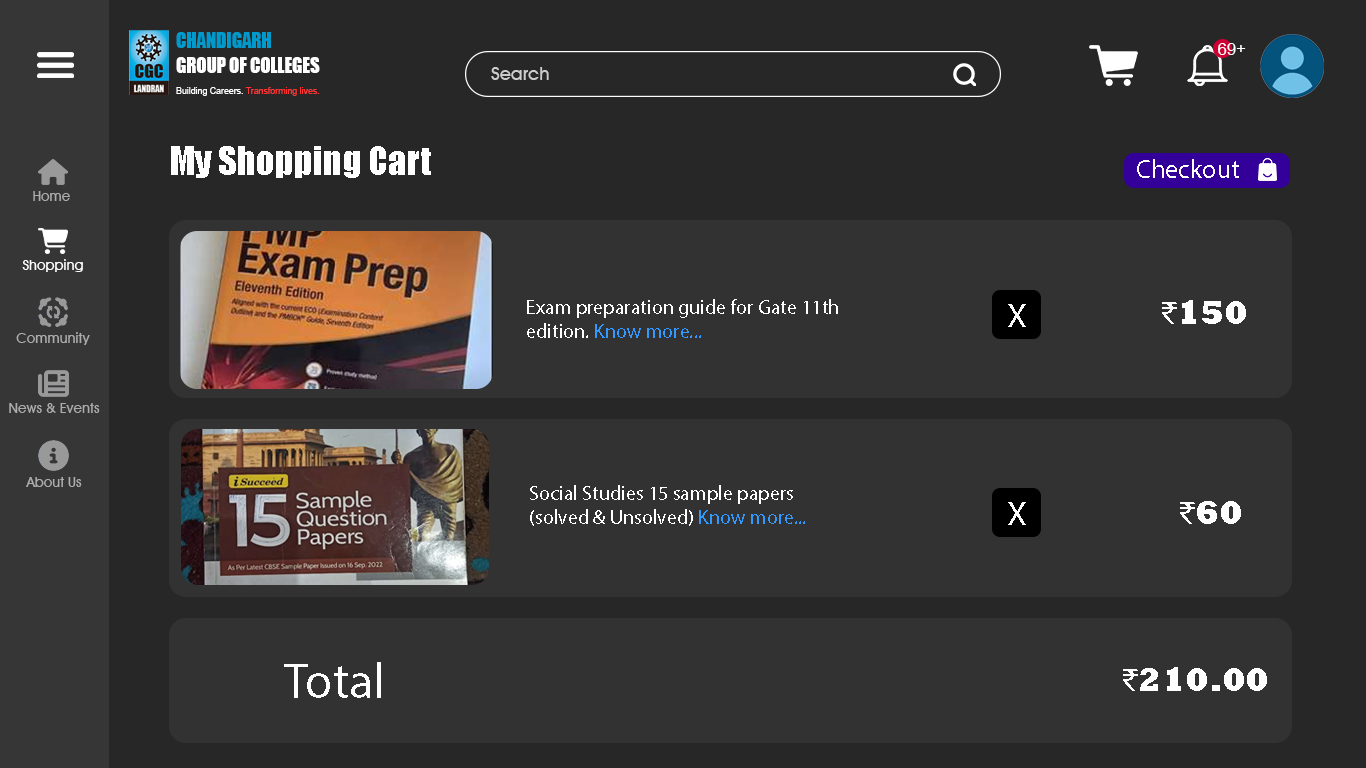
<style>
.page{position:relative;width:1366px;height:768px;background:#323232}
.page>*{position:absolute;margin:0}
.t1{font:20.2px "Impact";color:#ffffff;scale:0.92 1}
.t2{font:20.2px "Impact";color:#0099cc;scale:0.92 1}
.t3{font:16.6px "ArialMT";color:#ffffff}
.t4{font:18.4px "AvantGardeITCbyBT-Medium";color:#cccccc}
.t5{font:9.6px "ArialMT";color:#ff3333;scale:0.92 1}
.t6{font:9.6px "ArialMT";color:#ffffff;scale:0.92 1}
.t7{font:36.8px "Impact";color:#ffffff}
.t8{font:26.2px "MyriadPro-Regular";color:#ffffff}
.t9{font:14px "AvantGardeITCbyBT-Medium";color:#acacac}
.t10{font:14px "AvantGardeITCbyBT-Medium";color:#ffffff}
.t11{font:20px "MyriadPro-Regular";color:#ffffff}
.t12{font:20px "MyriadPro-Regular";color:#3399ff}
.t13{font:34px "MyriadPro-Regular";color:#ffffff}
.t14{font:34px "Rockwell-ExtraBold";color:#ffffff}
.t15{font:50px "MyriadPro-Regular";color:#ffffff}
</style>
<div class="page">
<p class="t1" style="left:176px;top:32px;width:144px;height:41px"><span class="t2">CHANDIGARH<br></span>GROUP OF COLLEGES</p>
<p class="t3" style="left:1218px;top:43px;width:28px;height:12px">69+</p>
<p class="t4" style="left:491px;top:67px;width:58px;height:13px">Search</p>
<p class="t5" style="left:176px;top:87px;width:144px;height:9px"><span class="t6">Building Careers. </span>Transforming lives.</p>
<p class="t7" style="left:171px;top:146px;width:260px;height:32px">My Shopping Cart</p>
<p class="t8" style="left:1137px;top:159px;width:102px;height:19px">Checkout</p>
<p class="t9" style="left:33px;top:191px;width:37px;height:10px">Home</p>
<p class="t10" style="left:22px;top:259px;width:61px;height:13px">Shopping</p>
<p class="t11" style="left:527px;top:299px;width:311px;height:39px">Exam preparation guide for Gate 11th edition. <span class="t12">Know more...</span></p>
<p class="t13" style="left:1008px;top:304px;width:18px;height:23px">X</p>
<p class="t14" style="left:1162px;top:300px;width:84px;height:24px"><span class="t13">₹</span>150</p>
<p class="t9" style="left:16px;top:332px;width:74px;height:13px">Community</p>
<p class="t9" style="left:9px;top:403px;width:91px;height:10px">News &amp; Events</p>
<p class="t9" style="left:26px;top:477px;width:56px;height:10px">About Us</p>
<p class="t11" style="left:530px;top:485px;width:275px;height:41px">Social Studies 15 sample papers (solved &amp; Unsolved) <span class="t12">Know more...</span></p>
<p class="t13" style="left:1008px;top:502px;width:18px;height:23px">X</p>
<p class="t14" style="left:1180px;top:501px;width:61px;height:23px"><span class="t13">₹</span>60</p>
<p class="t15" style="left:284px;top:662px;width:97px;height:36px">Total</p>
<p class="t14" style="left:1123px;top:667px;width:144px;height:24px"><span class="t13">₹</span>210.00</p>
</div>
